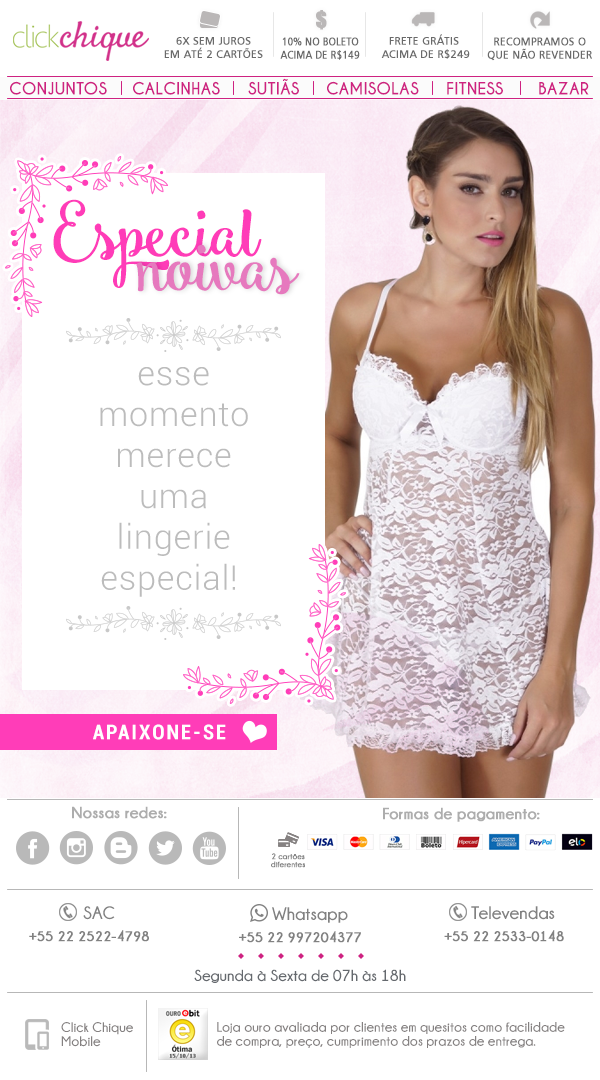
<style>
.page{position:relative;width:600px;height:1080px;background:#ffffff}
.page>*{position:absolute;margin:0}
.t1{font:20.8px "Impact";color:#bab7b7;text-transform:uppercase;font-weight:bold}
.t2{font:11px "Humanist777BT-RomanB";color:#6a6a6a;text-transform:uppercase;font-weight:bold}
.t3{font:11px "Humanist777BT-RomanB";color:#6a6a6a;text-transform:uppercase;font-weight:bold;scale:0.88 1}
.t4{font:16px "CaviarDreams-Bold";color:#ce2281;text-transform:uppercase}
.t5{font:71.4px "Smoothie_Shoppe";color:#ff3cb8}
.t6{font:71.4px "Smoothie_Shoppe";color:#e679be}
.t7{font:34.1px "Roboto-Light";letter-spacing:0.025em;color:#bcbcbc}
.t8{font:20.6px "Roboto-BoldCondensed";letter-spacing:0.1em;color:#ffffff;text-transform:uppercase}
.t9{font:16px "Champagne&Limousines-Bold";color:#adadad;font-weight:bold}
.t10{font:8px/8px "Champagne&Limousines-Bold";color:#818181;font-weight:bold}
.t11{font:18px "Champagne&Limousines-Bold";color:#818181}
.t12{font:14px "Champagne&Limousines-Bold";color:#818181;text-transform:uppercase;font-weight:bold}
.t13{font:16px "Champagne&Limousines-Bold";color:#65696e}
.t14{font:14px/14px "Champagne&Limousines-Bold";color:#858181}
</style>
<div class="page">
<p class="t1" style="left:316px;top:10px;width:11px;height:20px">$</p>
<p class="t2" style="left:164px;top:37px;width:99px;height:21px;text-align:center">6x sem juros<br>em até 2 cartões</p>
<p class="t3" style="left:280px;top:37px;width:80px;height:23px;text-align:center">10% no boleto<br>acima de R$149</p>
<p class="t2" style="left:381px;top:34px;width:89px;height:25px;text-align:center">frete grátis <br>acima de R$249</p>
<p class="t2" style="left:487px;top:37px;width:105px;height:24px;text-align:center">recompramos o<br>que não revender</p>
<p class="t4" style="left:248px;top:78px;width:51px;height:17px">Sutiãs</p>
<p class="t4" style="left:10px;top:81px;width:97px;height:14px">Conjuntos</p>
<p class="t4" style="left:133px;top:81px;width:87px;height:14px">Calcinhas</p>
<p class="t4" style="left:327px;top:81px;width:92px;height:14px">Camisolas</p>
<p class="t4" style="left:447px;top:81px;width:56px;height:14px">fitness</p>
<p class="t4" style="left:539px;top:82px;width:50px;height:13px">Bazar</p>
<p class="t5" style="left:53px;top:199px;width:209px;height:89px">Especial</p>
<p class="t6" style="left:136px;top:244px;width:164px;height:51px">noivas</p>
<p class="t7" style="left:100px;top:367px;width:148px;height:230px;text-align:center">esse<br>momento<br>merece<br>uma<br>lingerie<br>especial!</p>
<p class="t8" style="left:93px;top:724px;width:133px;height:16px">apaixone-se</p>
<p class="t9" style="left:72px;top:806px;width:95px;height:13px">Nossas redes:</p>
<p class="t9" style="left:383px;top:807px;width:157px;height:15px">Formas de pagamento:</p>
<p class="t10" style="left:271px;top:853px;width:34px;height:15px;text-align:center">2 cartões<br>diferentes</p>
<p class="t11" style="left:83px;top:906px;width:32px;height:14px">SAC</p>
<p class="t11" style="left:272px;top:907px;width:76px;height:16px">Whatsapp</p>
<p class="t11" style="left:471px;top:906px;width:84px;height:14px">Televendas</p>
<p class="t12" style="left:29px;top:930px;width:120px;height:12px">+55 22 2522-4798</p>
<p class="t12" style="left:239px;top:931px;width:122px;height:12px">+55 22 997204377</p>
<p class="t12" style="left:444px;top:930px;width:120px;height:12px">+55 22 2533-0148</p>
<p class="t13" style="left:194px;top:969px;width:212px;height:14px">Segunda à Sexta de 07h às 18h</p>
<p class="t14" style="left:61px;top:1022px;width:72px;height:25px">Click Chique<br>Mobile</p>
<p class="t14" style="left:217px;top:1022px;width:348px;height:26px">Loja ouro avaliada por clientes em quesitos como facilidade de compra, preço, cumprimento dos prazos de entrega.</p>
</div>
